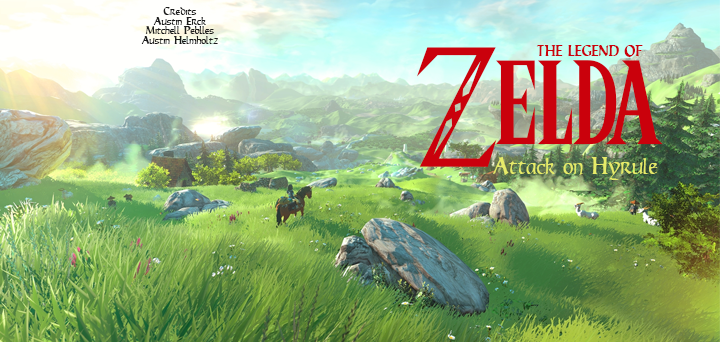
<style>
.page{position:relative;width:720px;height:342px}
.page>*{position:absolute;margin:0}
.t1{font:10px "Ravenna";color:#1c1c1c;scale:0.8 1}
.t2{font:137.9px "Triforce";color:#ca010c;scale:0.8 1}
.t3{font:13.5px "Ravenna";color:#ca010c;scale:0.8 1}
.t4{font:21px "Ravenna";color:#e6eb69;scale:0.79 1}
</style>
<div class="page">
<p class="t1" style="left:141px;top:7px;width:77px;height:37px;text-align:center">Credits<br>Austin Erck<br>Mitchell Peblles<br>Austin Helmholtz</p>
<p class="t2" style="left:417px;top:47px;width:246px;height:120px">Zelda</p>
<p class="t3" style="left:536px;top:45px;width:107px;height:12px">THE LEGEND OF</p>
<p class="t4" style="left:493px;top:157px;width:165px;height:23px">Attack on Hyrule</p>
</div>
